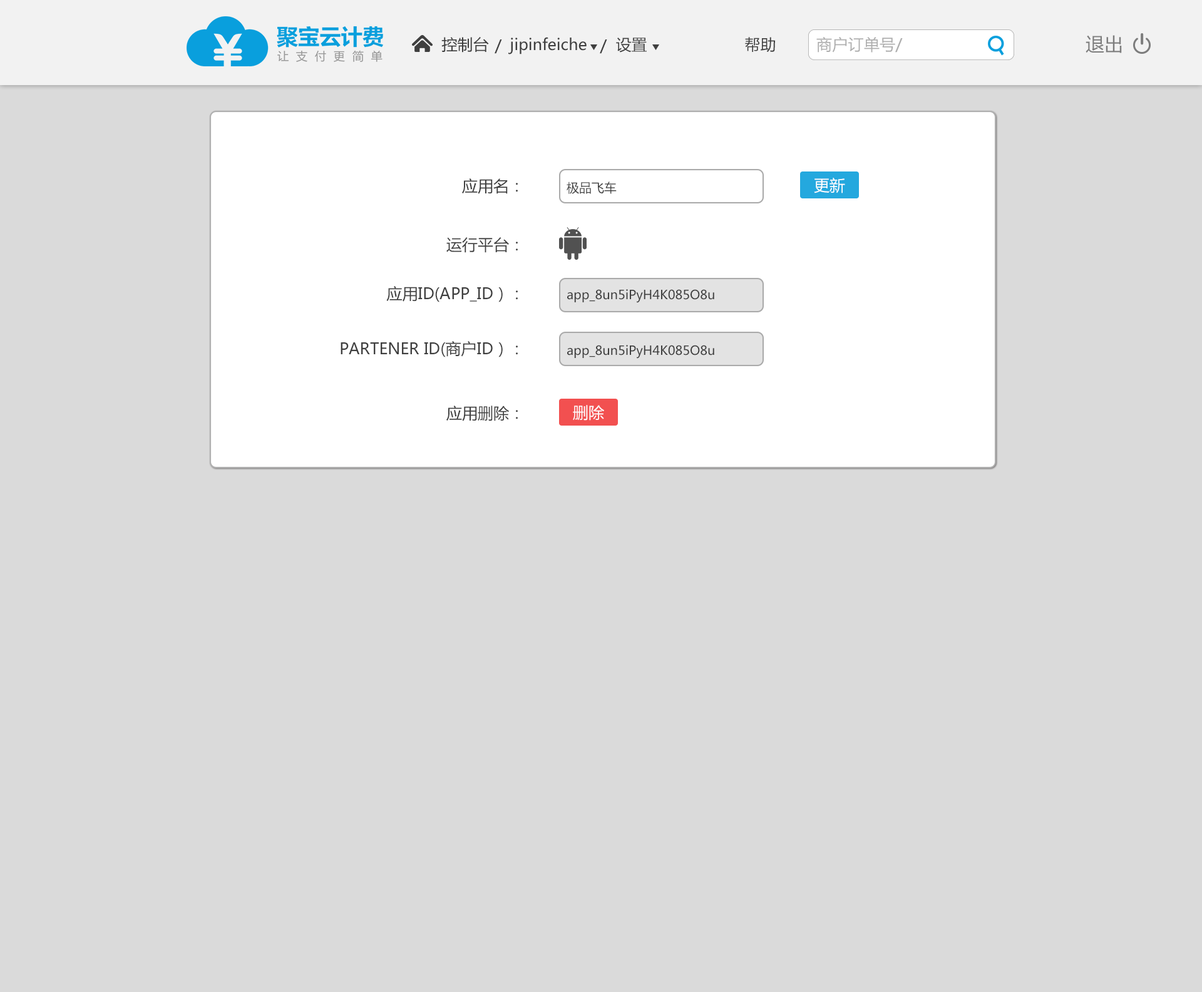
<style>
.page{position:relative;width:1202px;height:992px;background:#dadada}
.page>*{position:absolute;margin:0}
.t1{font:15.6px "MicrosoftYaHei";color:#3f3f3f}
.t2{font:15.6px "MicrosoftYaHei";color:#aeaeae}
.t3{font:18.8px "MicrosoftYaHei";color:#7d7d7d}
.t4{font:12.5px "MicrosoftYaHei";color:#3f3f3f}
.t5{font:15.6px "MicrosoftYaHei";color:#ffffff}
</style>
<div class="page">
<p class="t1" style="left:441px;top:37px;width:48px;height:16px">控制台</p>
<p class="t1" style="left:495px;top:39px;width:7px;height:15px">/</p>
<p class="t1" style="left:508px;top:37px;width:79px;height:17px">jipinfeiche</p>
<p class="t1" style="left:600px;top:39px;width:7px;height:15px">/</p>
<p class="t1" style="left:616px;top:38px;width:31px;height:15px">设置</p>
<p class="t1" style="left:745px;top:37px;width:30px;height:15px">帮助</p>
<p class="t2" style="left:816px;top:37px;width:87px;height:16px">商户订单号/ 聚宝订单号/ 付款方名称</p>
<p class="t3" style="left:1085px;top:35px;width:37px;height:18px">退出</p>
<p class="t1" style="left:462px;top:178px;width:56px;height:16px">应用名：</p>
<p class="t4" style="left:567px;top:182px;width:50px;height:12px">极品飞车</p>
<p class="t5" style="left:814px;top:178px;width:31px;height:15px">更新</p>
<p class="t1" style="left:446px;top:237px;width:72px;height:16px">运行平台：</p>
<p class="t1" style="left:386px;top:286px;width:132px;height:16px">应用ID(APP_ID）：</p>
<p class="t4" style="left:567px;top:289px;width:147px;height:14px">app_8un5iPyH4K085O8u</p>
<p class="t1" style="left:341px;top:341px;width:177px;height:16px">PARTENER ID(商户ID）：</p>
<p class="t4" style="left:567px;top:345px;width:147px;height:14px">app_8un5iPyH4K085O8u</p>
<p class="t1" style="left:446px;top:406px;width:72px;height:15px">应用删除：</p>
<p class="t5" style="left:573px;top:405px;width:31px;height:16px">删除</p>
</div>
